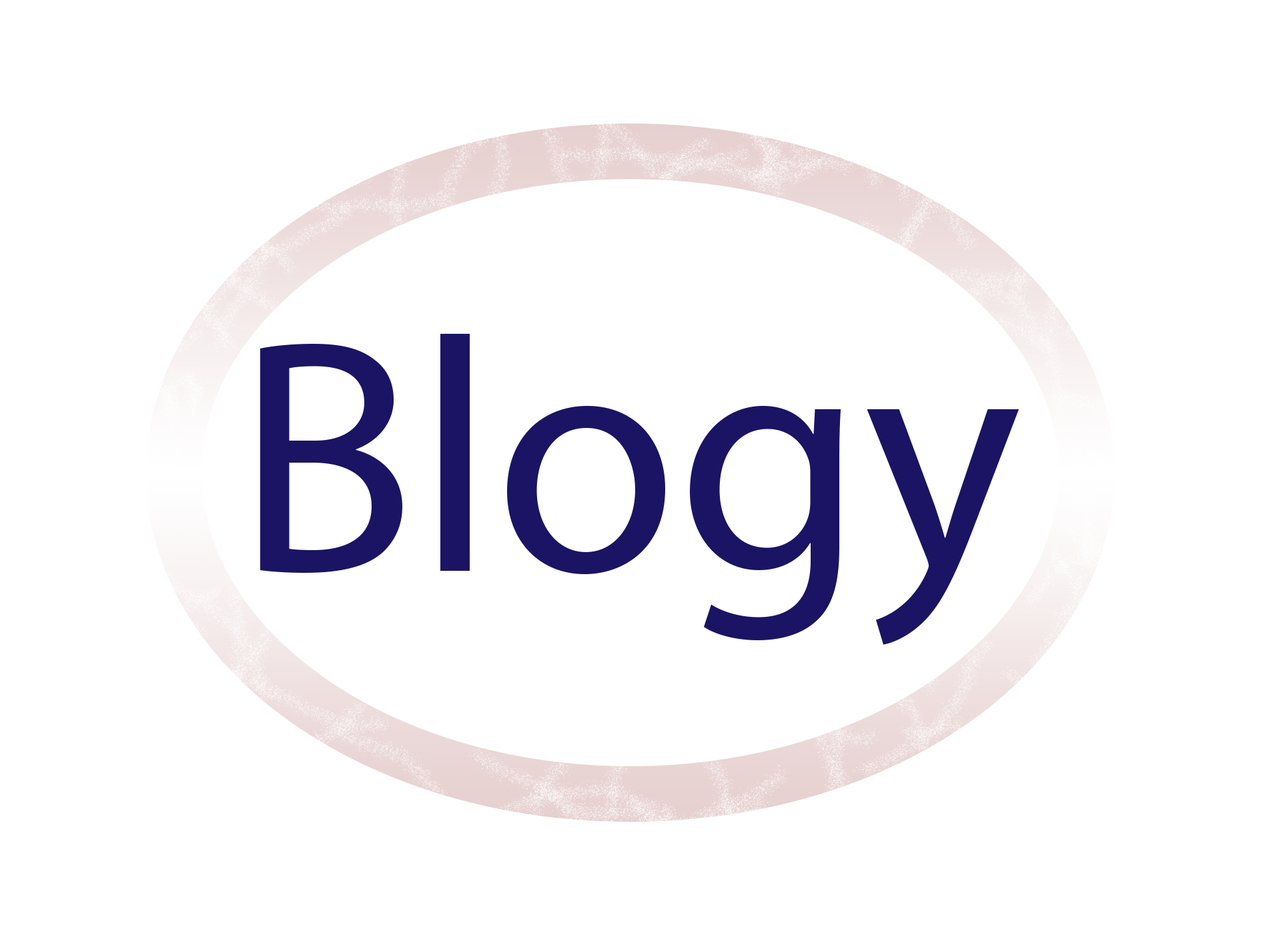
<style>
.page{position:relative;width:1261px;height:946px;background:#ffffff}
.page>*{position:absolute;margin:0}
.t1{font:333.6px "MyriadPro-Regular";color:#1b1464}
</style>
<div class="page">
<p class="t1" style="left:260px;top:334px;width:759px;height:311px">Blogy</p>
</div>
